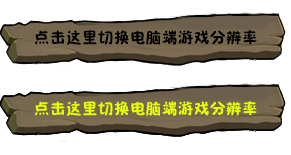
<style>
.page{position:relative;width:291px;height:155px;background:#ffffff}
.page>*{position:absolute;margin:0}
.t1{font:16px "FZSEK--GBK1-0";color:#000000}
</style>
<div class="page">
<p class="t1" style="left:35px;top:30px;width:222px;height:15px">点击这里切换电脑端游戏分辨率</p>
</div>
